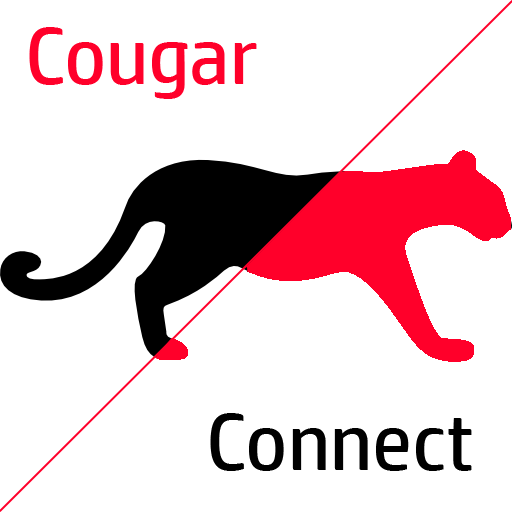
<style>
.page{position:relative;width:512px;height:512px;background:#ffffff}
.page>*{position:absolute;margin:0}
.t1{font:80.6px "HPSimplified-Regular";color:#ff002a}
.t2{font:80.6px "HPSimplified-Regular";color:#000000}
</style>
<div class="page">
<p class="t1" style="left:29px;top:27px;width:228px;height:72px">Cougar</p>
<p class="t2" style="left:210px;top:413px;width:262px;height:58px">Connect</p>
</div>
